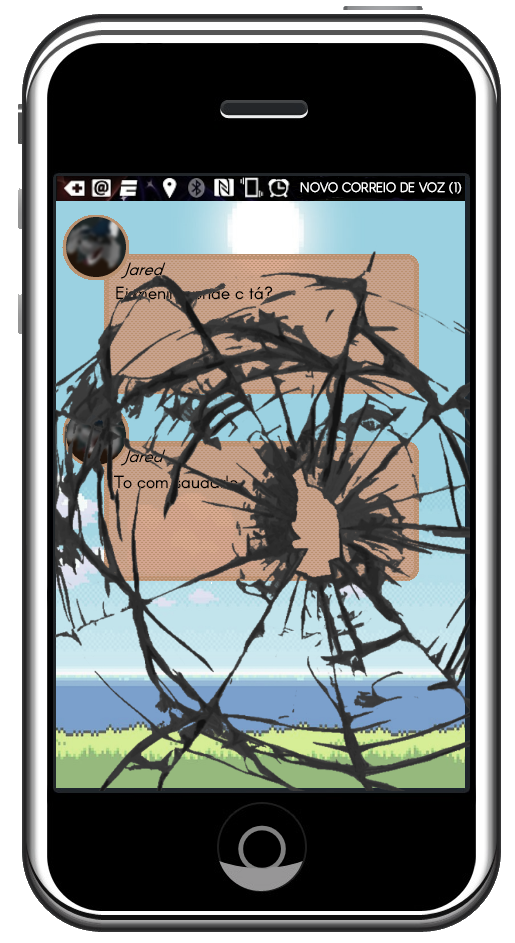
<style>
.page{position:relative;width:515px;height:943px;background:#000000}
.page>*{position:absolute;margin:0}
.t1{font:13.3px "Arcon-Regular";color:#ffffff;scale:0.92 1}
.t2{font:17.3px "Arcon-Regular";color:#000000}
</style>
<div class="page">
<p class="t1" style="left:300px;top:182px;width:162px;height:12px">NOVO CORREIO DE VOZ (1)</p>
<p class="t2" style="left:116px;top:286px;width:157px;height:14px">Ei menino onde c tá?</p>
<p class="t2" style="left:114px;top:475px;width:124px;height:14px">To com saudade</p>
</div>
